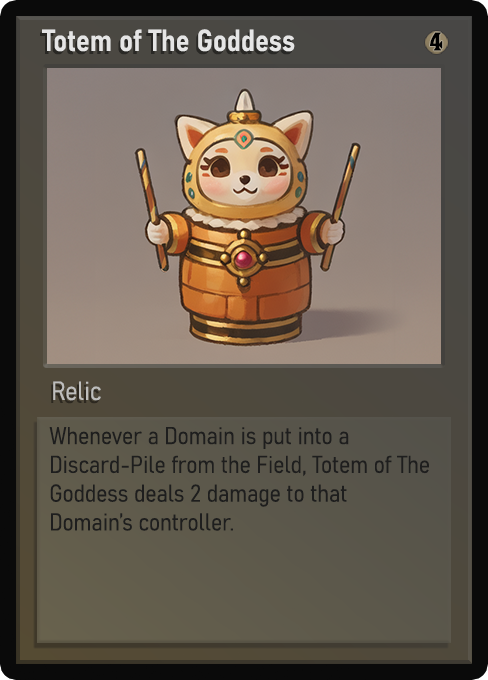
<style>
.page{position:relative;width:488px;height:680px}
.page>*{position:absolute;margin:0}
.t1{font:30px "Bahnschrift-SemiBoldSemiCondensed";color:#f2f2f2;font-weight:bold}
.t2{font:25px "WTRRoycroft";color:#000000;font-weight:bold;scale:1.09 1}
.t3{font:26px "Bahnschrift-LightSemiCondensed";color:#c8c8c8;font-weight:bold}
.t4{font:24px "Bahnschrift-LightSemiCondensed";color:#1e1e1e;font-weight:bold}
</style>
<div class="page">
<p class="t1" style="left:42px;top:29px;width:253px;height:23px;opacity:0.9">Totem of The Goddess</p>
<p class="t2" style="left:430px;top:32px;width:13px;height:19px">4</p>
<p class="t3" style="left:53px;top:381px;width:48px;height:20px;opacity:0.9">Relic</p>
<p class="t4" style="left:49px;top:427px;width:380px;height:104px">Whenever a Domain is put into a Discard-Pile from the Field, Totem of The Goddess deals 2 damage to that Domain’s controller.</p>
</div>
